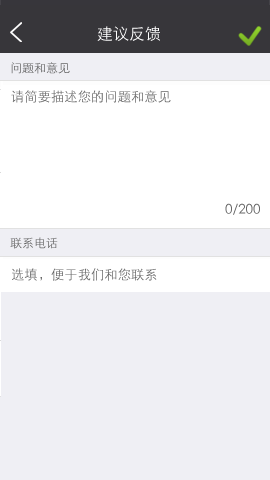
<style>
.page{position:relative;width:270px;height:480px;background:#efeff4}
.page>*{position:absolute;margin:0}
.t1{font:16px "STXihei";color:#ffffff}
.t2{font:12px "STXihei"}
.t3{font:13.3px "STXihei";color:#676767}
.t4{font:12px "STXihei";color:#676767}
</style>
<div class="page">
<p class="t1" style="left:97px;top:26px;width:63px;height:15px">建议反馈</p>
<p class="t2" style="left:11px;top:62px;width:59px;height:12px">问题和意见</p>
<p class="t3" style="left:11px;top:90px;width:160px;height:13px">请简要描述您的问题和意见</p>
<p class="t3" style="left:225px;top:203px;width:35px;height:12px">0/200</p>
<p class="t4" style="left:10px;top:237px;width:48px;height:12px">联系电话</p>
<p class="t3" style="left:12px;top:268px;width:145px;height:13px">选填，便于我们和您联系</p>
</div>
